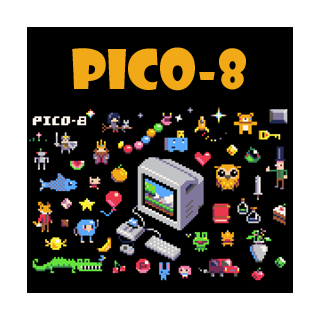
<style>
.page{position:relative;width:320px;height:320px;background:#000000}
.page>*{position:absolute;margin:0}
.t1{font:53.3px "ShowcardGothic-Reg";color:#f1a917;text-transform:uppercase}
</style>
<div class="page">
<p class="t1" style="left:72px;top:47px;width:174px;height:44px">PICO-8</p>
</div>
